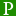
<style>
.page{position:relative;width:16px;height:16px;background:#1e8c00}
.page>*{position:absolute;margin:0}
.t1{font:20px "GaramondPremrPro";color:#ffffff}
</style>
<div class="page">
<p class="t1" style="left:3px;top:1px;width:11px;height:14px">P</p>
</div>
